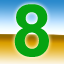
<style>
.page{position:relative;width:64px;height:64px;background:#06a311}
.page>*{position:absolute;margin:0}
.t1{font:72px "Arial-BoldMT";color:#06a311}
</style>
<div class="page">
<p class="t1" style="left:14px;top:4px;width:35px;height:53px">8</p>
</div>
